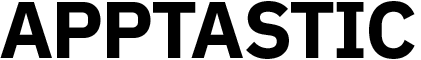
<style>
.page{position:relative;width:421px;height:60px;background:#ffffff}
.page>*{position:absolute;margin:0}
.t1{font:80px "IBMPlexSans-Bold";letter-spacing:-0.03em;color:#000000}
</style>
<div class="page">
<p class="t1" style="left:0px;top:1px;width:415px;height:58px">APPTASTIC</p>
</div>
